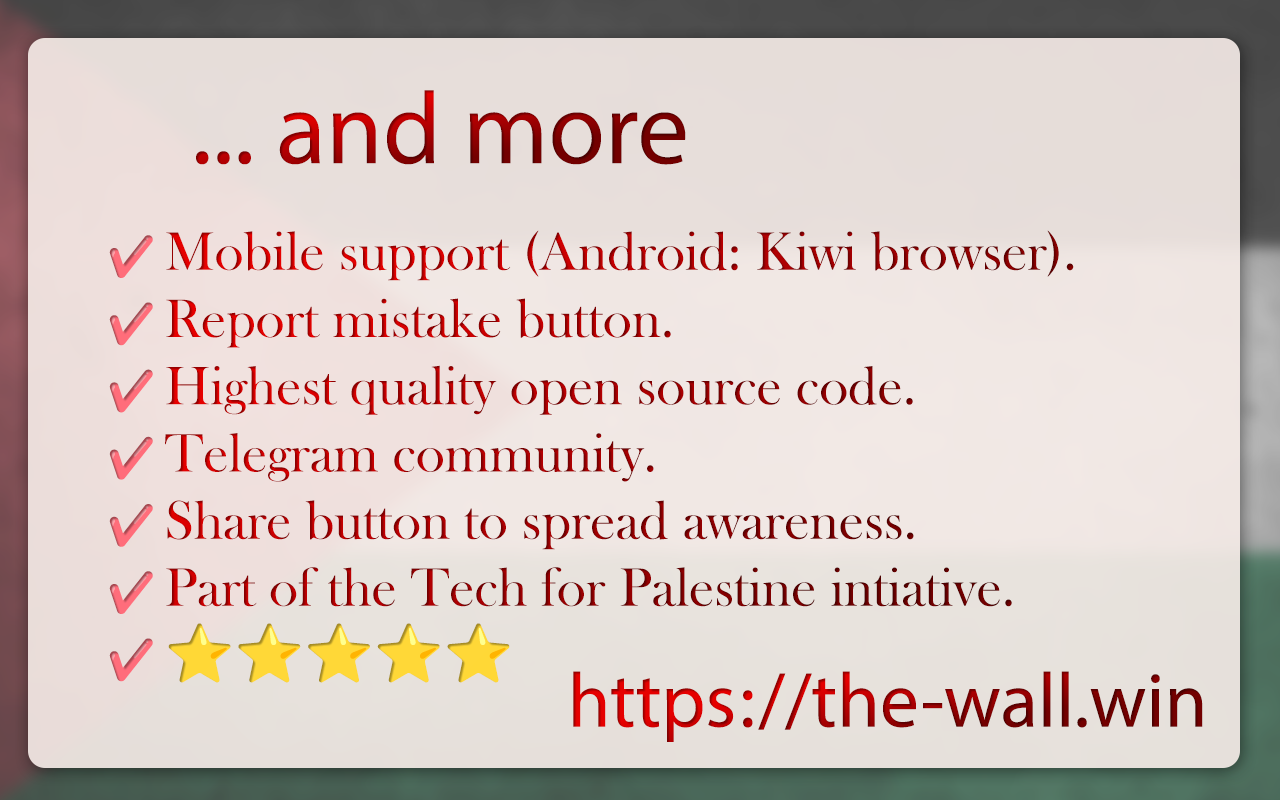
<style>
.page{position:relative;width:1280px;height:800px}
.page>*{position:absolute;margin:0}
.t1{font:102.8px "MyriadPro-Regular"}
.t2{font:56px "BaskOldFace"}
.t3{font:38.8px "NotoColorEmoji-SVG"}
.t4{font:56px "NotoColorEmoji-SVG"}
.t5{font:108.3px "MyriadArabic-Regular"}
</style>
<div class="page">
<p class="t1" style="left:196px;top:90px;width:490px;height:75px">... and more</p>
<p class="t2" style="left:109px;top:230px;width:965px;height:453px"><span class="t3">✔️ </span>Mobile support (Android: Kiwi browser).<br><span class="t3">✔️ </span>Report mistake button.<br><span class="t3">✔️ </span>Highest quality open source code.<br><span class="t3">✔️ </span>Telegram community.<br><span class="t3">✔️ </span>Share button to spread awareness.<br><span class="t3">✔️ </span>Part of the Tech for Palestine intiative.<br><span class="t3">✔️ </span><span class="t4">⭐⭐⭐⭐⭐</span></p>
<p class="t5" style="left:573px;top:671px;width:630px;height:71px">https://the-wall.win</p>
</div>
